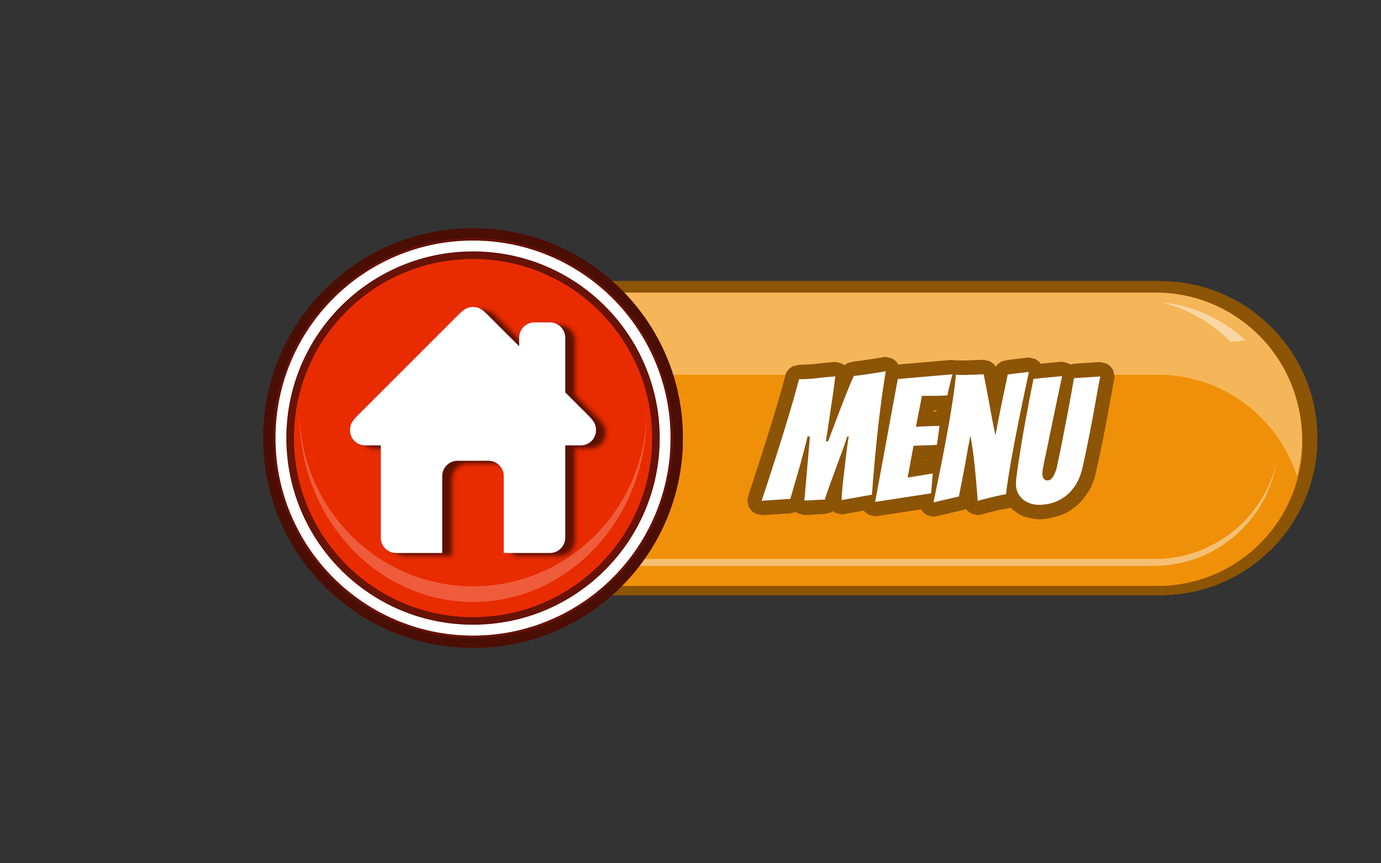
<style>
.page{position:relative;width:1381px;height:863px;background:#333333}
.page>*{position:absolute;margin:0}
.t1{font:172.7px "Bangers-Regular";color:#ffffff}
</style>
<div class="page">
<p class="t1" style="left:762px;top:371px;width:339px;height:134px">menu</p>
</div>
